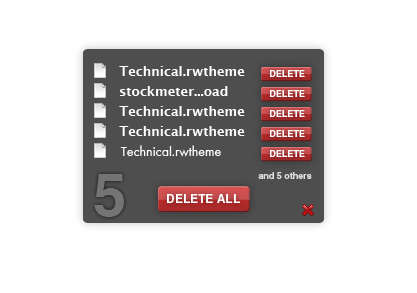
<style>
.page{position:relative;width:417px;height:293px;background:#ffffff}
.page>*{position:absolute;margin:0}
.t1{font:13px "LucidaGrande-Bold";color:#ffffff}
.t2{font:9px "Helvetica-Bold";color:#ffffff;text-transform:uppercase}
.t3{font:14px "Futura-Normal";color:#ffffff}
.t4{font:60px "Helvetica-Bold";color:#747474;text-transform:uppercase}
.t5{font:9px "Helvetica-Bold";color:#e1dfdf}
.t6{font:12px "Helvetica-Bold";color:#ffffff;text-transform:uppercase}
</style>
<div class="page">
<p class="t1" style="left:119px;top:66px;width:126px;height:10px">Technical.rwtheme</p>
<p class="t2" style="left:270px;top:70px;width:35px;height:7px">DELETE</p>
<p class="t1" style="left:119px;top:86px;width:109px;height:10px">stockmeter...oad</p>
<p class="t2" style="left:270px;top:90px;width:35px;height:7px">DELETE</p>
<p class="t1" style="left:119px;top:106px;width:126px;height:10px">Technical.rwtheme</p>
<p class="t2" style="left:270px;top:110px;width:35px;height:7px">DELETE</p>
<p class="t1" style="left:119px;top:126px;width:126px;height:10px">Technical.rwtheme</p>
<p class="t2" style="left:270px;top:130px;width:35px;height:7px">DELETE</p>
<p class="t3" style="left:120px;top:145px;width:101px;height:12px">Technical.rwtheme</p>
<p class="t2" style="left:270px;top:150px;width:35px;height:7px">DELETE</p>
<p class="t4" style="left:94px;top:174px;width:30px;height:43px">5</p>
<p class="t5" style="left:258px;top:172px;width:54px;height:7px">and 5 others</p>
<p class="t6" style="left:167px;top:194px;width:73px;height:9px">DELETE ALL</p>
</div>
